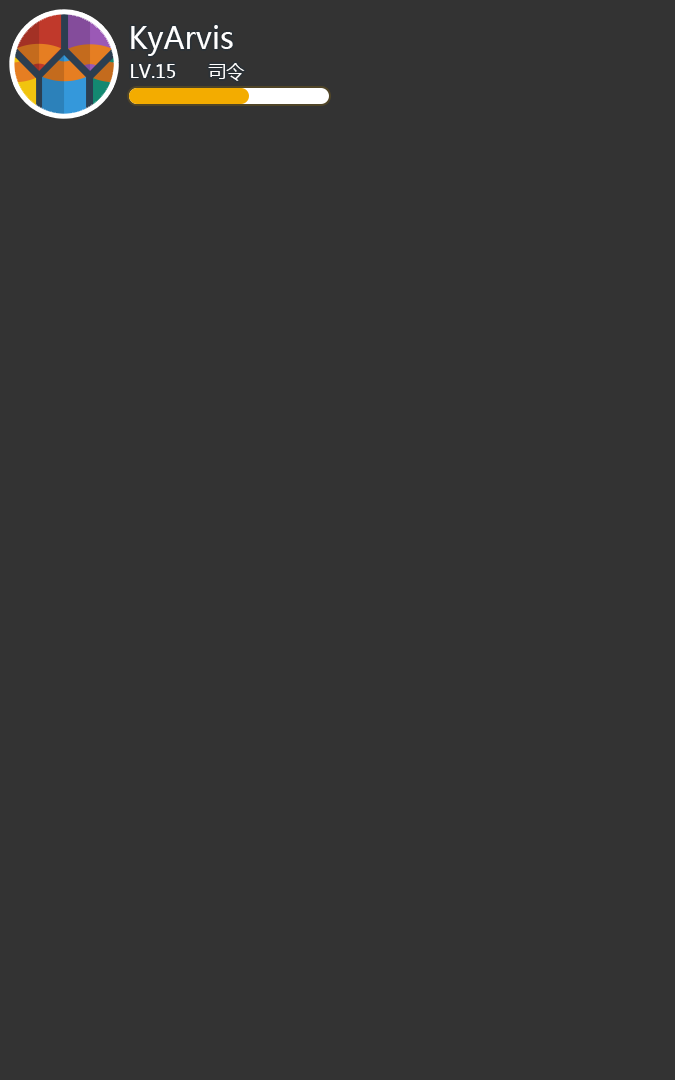
<style>
.page{position:relative;width:675px;height:1080px;background:#333333}
.page>*{position:absolute;margin:0}
.t1{font:30px "MicrosoftYaHei";color:#ffffff}
.t2{font:18px "MicrosoftYaHei";color:#ffffff}
</style>
<div class="page">
<p class="t1" style="left:131px;top:25px;width:102px;height:31px">KyArvis</p>
<p class="t2" style="left:131px;top:63px;width:114px;height:18px">LV.15      司令</p>
</div>
